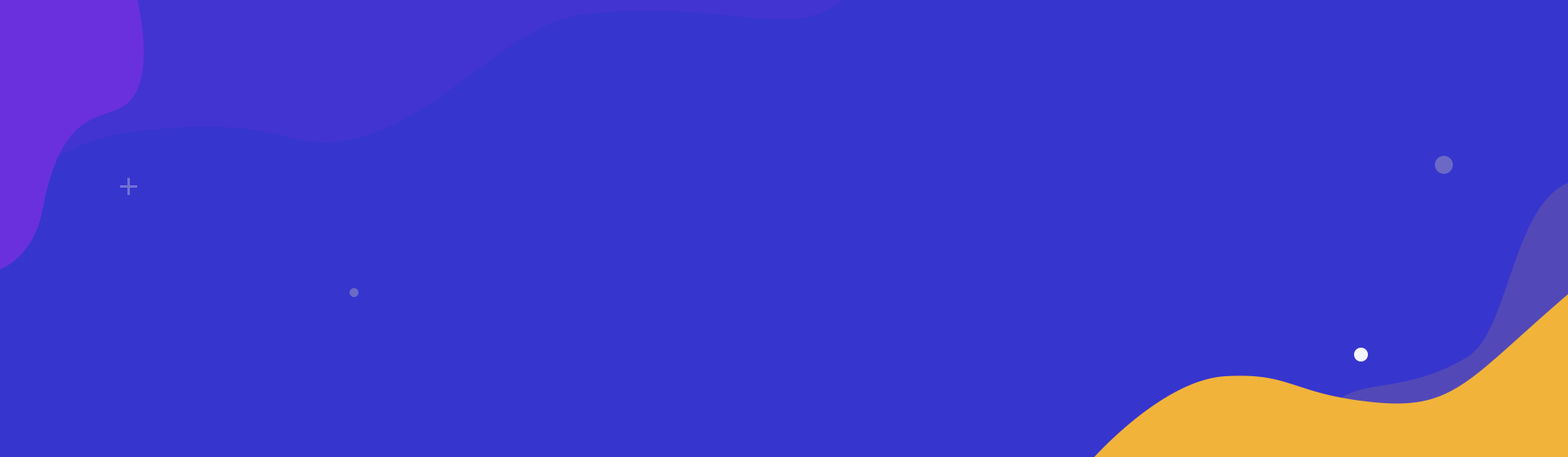
<style>
.page{position:relative;width:1568px;height:457px;background:#3635ce}
.page>*{position:absolute;margin:0}
.t1{font:36.8px "VarelaRound-Regular";letter-spacing:-0.06em;color:#7372d5}
</style>
<div class="page">
<p class="t1" style="left:120px;top:178px;width:17px;height:17px">+</p>
</div>
